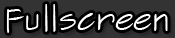
<style>
.page{position:relative;width:175px;height:38px;background:#333333}
.page>*{position:absolute;margin:0}
.t1{font:33.3px "SketchFlowPrint";color:#ffffff}
</style>
<div class="page">
<p class="t1" style="left:6px;top:4px;width:162px;height:29px">Fullscreen</p>
</div>
